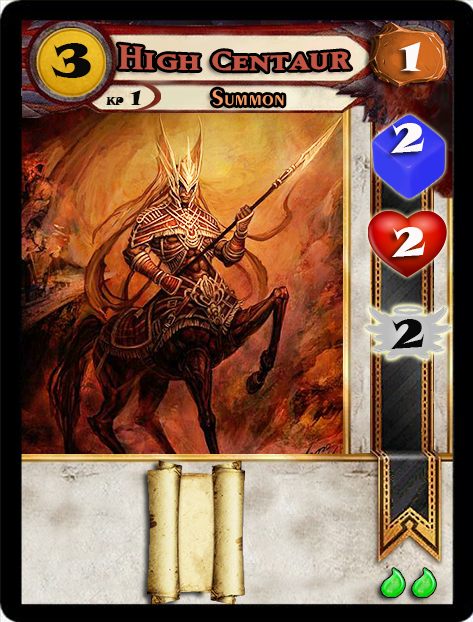
<style>
.page{position:relative;width:473px;height:622px}
.page>*{position:absolute;margin:0}
.t1{font:46.6px "SnapITC-Regular";color:#090909;scale:1.05 1}
.t2{font:40px "MatrixBoldSmallCaps";color:#c25443;scale:1.06 1}
.t3{font:40px "SnapITC-Regular";color:#fef9f9;scale:1.05 1}
.t4{font:22.7px "Exotic350BT-DemiBold";color:#f89c64;scale:1.06 1}
.t5{font:20.5px "SnapITC-Regular";color:#090909}
.t6{font:40px "SnapITC-Regular";color:#090909;scale:1.05 1}
</style>
<div class="page">
<p class="t1" style="left:51px;top:43px;width:40px;height:35px">3</p>
<p class="t2" style="left:118px;top:44px;width:233px;height:28px">High Centaur</p>
<p class="t3" style="left:399px;top:42px;width:22px;height:29px">1</p>
<p class="t4" style="left:212px;top:89px;width:72px;height:17px">Summon</p>
<p class="t5" style="left:130px;top:90px;width:11px;height:15px">1</p>
<p class="t3" style="left:391px;top:123px;width:34px;height:30px">2</p>
<p class="t3" style="left:392px;top:227px;width:34px;height:30px">2</p>
<p class="t6" style="left:391px;top:319px;width:34px;height:30px">2</p>
</div>
